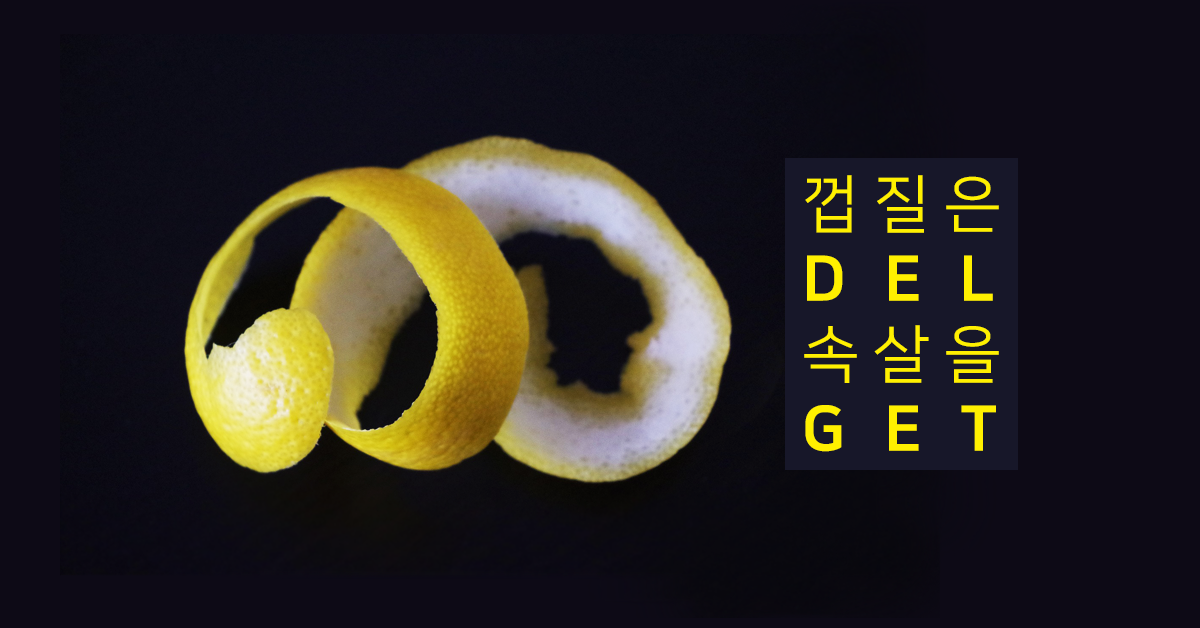
<style>
.page{position:relative;width:1200px;height:628px;background:#0d0a16}
.page>*{position:absolute;margin:0}
.t1{font:62.5px "NanumSquareR";letter-spacing:0.22em;color:#fff000}
.t2{font:62.5px "NanumSquareEB";letter-spacing:0.6em;color:#fff000}
.t3{font:62.5px "NanumSquareEB";letter-spacing:0.62em;color:#fff000}
</style>
<div class="page">
<p class="t1" style="left:804px;top:175px;width:195px;height:277px">껍질은<br><span class="t2">DEL<br></span>속살을<br><span class="t3">GET</span></p>
</div>
